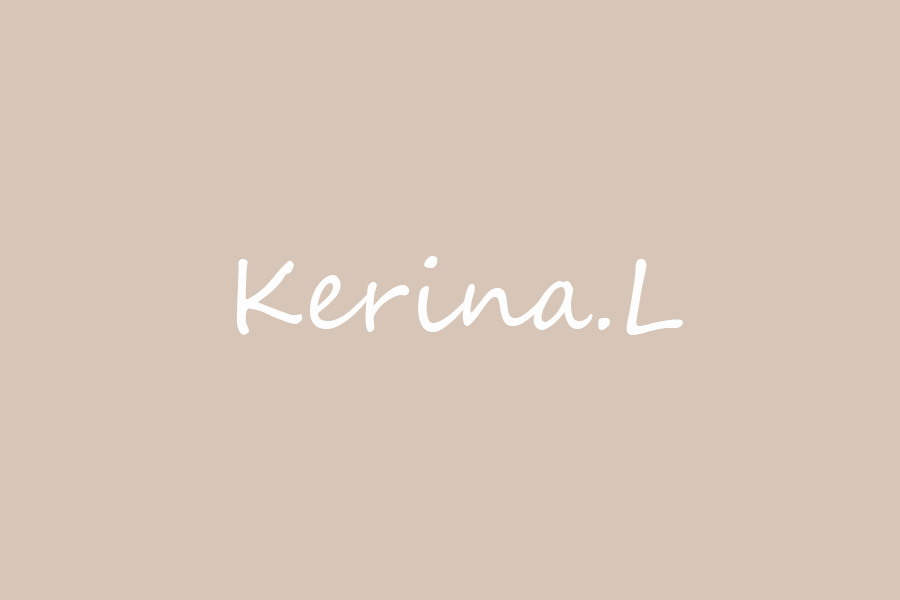
<style>
.page{position:relative;width:900px;height:600px;background:#d7c6b7}
.page>*{position:absolute;margin:0}
.t1{font:100px "SegoeScript";color:#fdfdfd}
</style>
<div class="page">
<p class="t1" style="left:236px;top:256px;width:447px;height:79px">Kerina.L</p>
</div>
